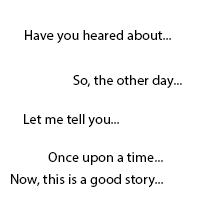
<style>
.page{position:relative;width:200px;height:200px;background:#ffffff}
.page>*{position:absolute;margin:0}
.t1{font:14px "MyriadPro-Regular";letter-spacing:0.01em;color:#000000}
</style>
<div class="page">
<p class="t1" style="left:25px;top:30px;width:146px;height:13px">Have you heared about...</p>
<p class="t1" style="left:73px;top:75px;width:109px;height:13px">So, the other day...</p>
<p class="t1" style="left:24px;top:114px;width:95px;height:14px">Let me tell you...</p>
<p class="t1" style="left:48px;top:152px;width:115px;height:13px">Once upon a time...</p>
<p class="t1" style="left:11px;top:174px;width:152px;height:14px">Now, this is a good story...</p>
</div>
